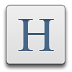
<style>
.page{position:relative;width:72px;height:72px}
.page>*{position:absolute;margin:0}
.t1{font:48px "Baskerville";color:#456789}
</style>
<div class="page">
<p class="t1" style="left:18px;top:19px;width:36px;height:32px">H</p>
</div>
